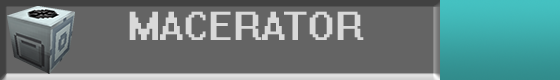
<style>
.page{position:relative;width:560px;height:80px;background:#646464}
.page>*{position:absolute;margin:0}
.t1{font:36px "System";color:#d9d9d9}
</style>
<div class="page">
<p class="t1" style="left:129px;top:11px;width:235px;height:29px">MACERATOR</p>
</div>
